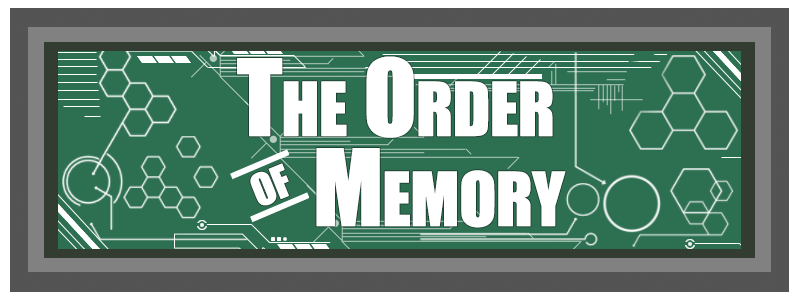
<style>
.page{position:relative;width:800px;height:300px;background:#2d6f51}
.page>*{position:absolute;margin:0}
.t1{font:98px "Impact";letter-spacing:-0.035em;color:#ffffff;font-variant:small-caps;font-weight:bold}
.t2{font:58px "Impact";letter-spacing:-0.035em;color:#ffffff;font-variant:small-caps;font-weight:bold}
</style>
<div class="page">
<p class="t1" style="left:237px;top:56px;width:316px;height:82px">The Order</p>
<p class="t1" style="left:316px;top:148px;width:250px;height:80px">Memory</p>
<p class="t2" style="left:250px;top:163px;width:39px;height:43px;rotate:-22deg">of</p>
</div>
